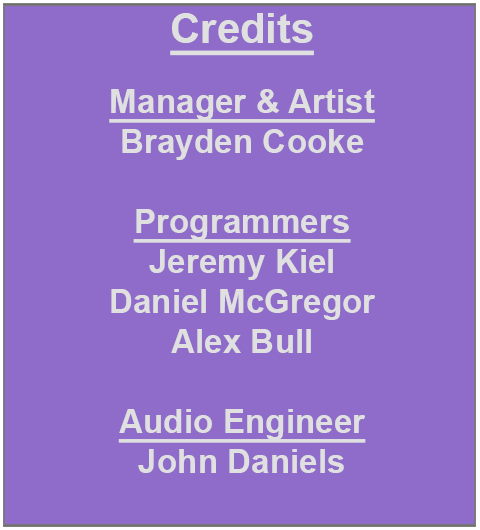
<style>
.page{position:relative;width:480px;height:530px;background:#8f6bca}
.page>*{position:absolute;margin:0}
.t1{font:33.3px "Arial-BoldMT";color:#e0e0e0}
.t2{font:41.7px "Arial-BoldMT";color:#e0e0e0;text-decoration:underline}
.t3{font:33.3px "Arial-BoldMT";color:#e0e0e0;text-decoration:underline}
</style>
<div class="page">
<p class="t1" style="left:109px;top:13px;width:266px;height:460px;text-align:center"><span class="t2">Credits<br><br></span><span class="t3">Manager &amp; Artist<br></span>Brayden Cooke<br><br><span class="t3">Programmers<br></span>Jeremy Kiel<br>Daniel McGregor<br>Alex Bull<br><br><span class="t3">Audio Engineer<br></span>John Daniels</p>
</div>
